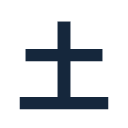
<style>
.page{position:relative;width:128px;height:128px;background:#ffffff}
.page>*{position:absolute;margin:0}
.t1{font:100px "HarmonyOS_Sans_SC_Bold";color:#15273c}
</style>
<div class="page">
<p class="t1" style="left:19px;top:21px;width:90px;height:89px">土</p>
</div>
